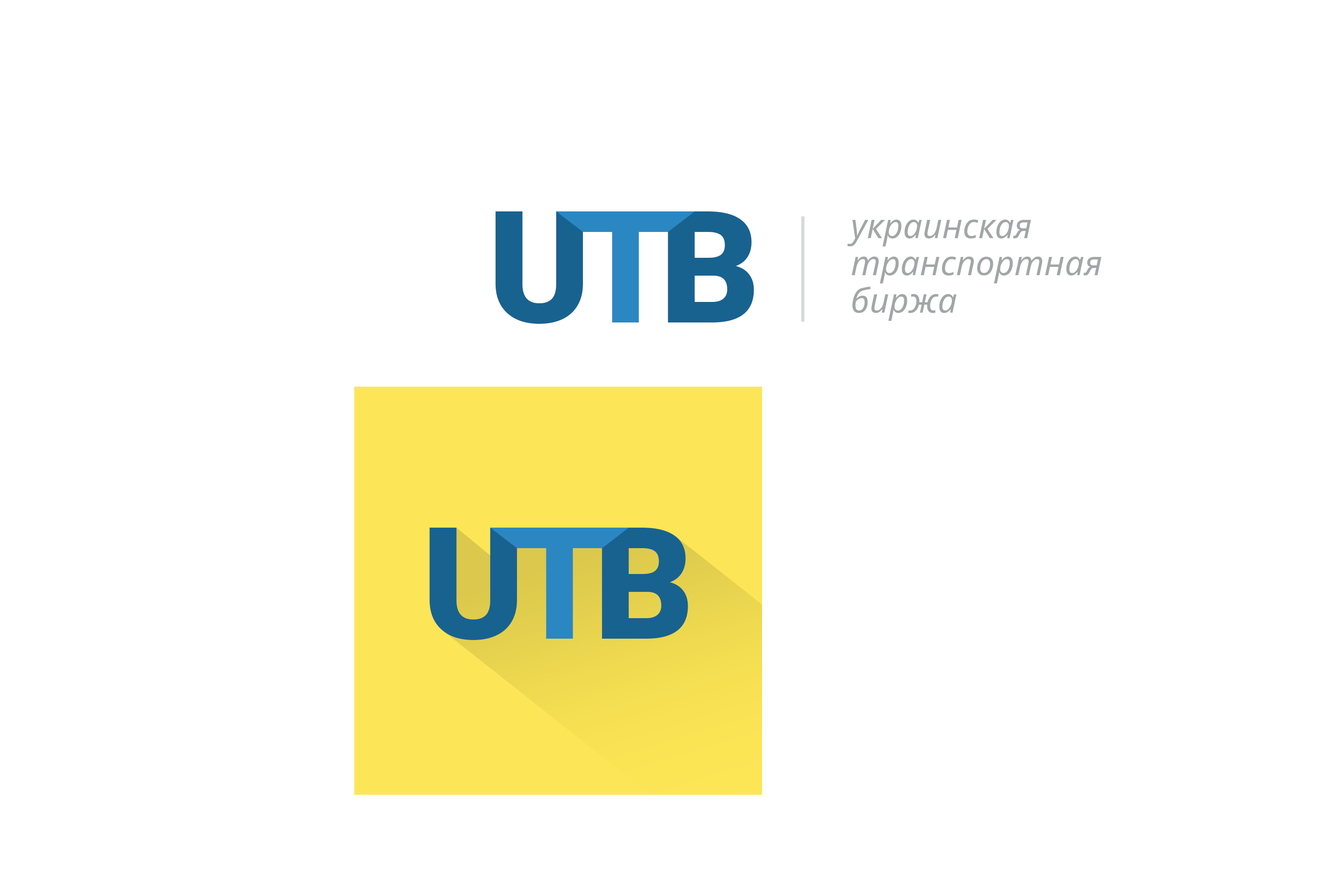
<style>
.page{position:relative;width:1337px;height:892px;background:#ffffff}
.page>*{position:absolute;margin:0}
.t1{font:156px "Roboto-Black";letter-spacing:-0.1em;color:#186290;text-transform:uppercase}
.t2{font:156px "Roboto-Black";letter-spacing:-0.1em;color:#2b87c1;text-transform:uppercase}
.t3{font:34.1px/37.2px "NotoSans-Italic";color:#a3a6a6}
</style>
<div class="page">
<p class="t1" style="left:495px;top:211px;width:88px;height:113px">u</p>
<p class="t2" style="left:580px;top:211px;width:174px;height:111px">t<span class="t1">b</span></p>
<p class="t3" style="left:847px;top:219px;width:255px;height:102px">украинская <br>транспортная <br>биржа</p>
<p class="t1" style="left:429px;top:527px;width:88px;height:113px">u</p>
<p class="t2" style="left:514px;top:527px;width:174px;height:111px">t<span class="t1">b</span></p>
</div>
